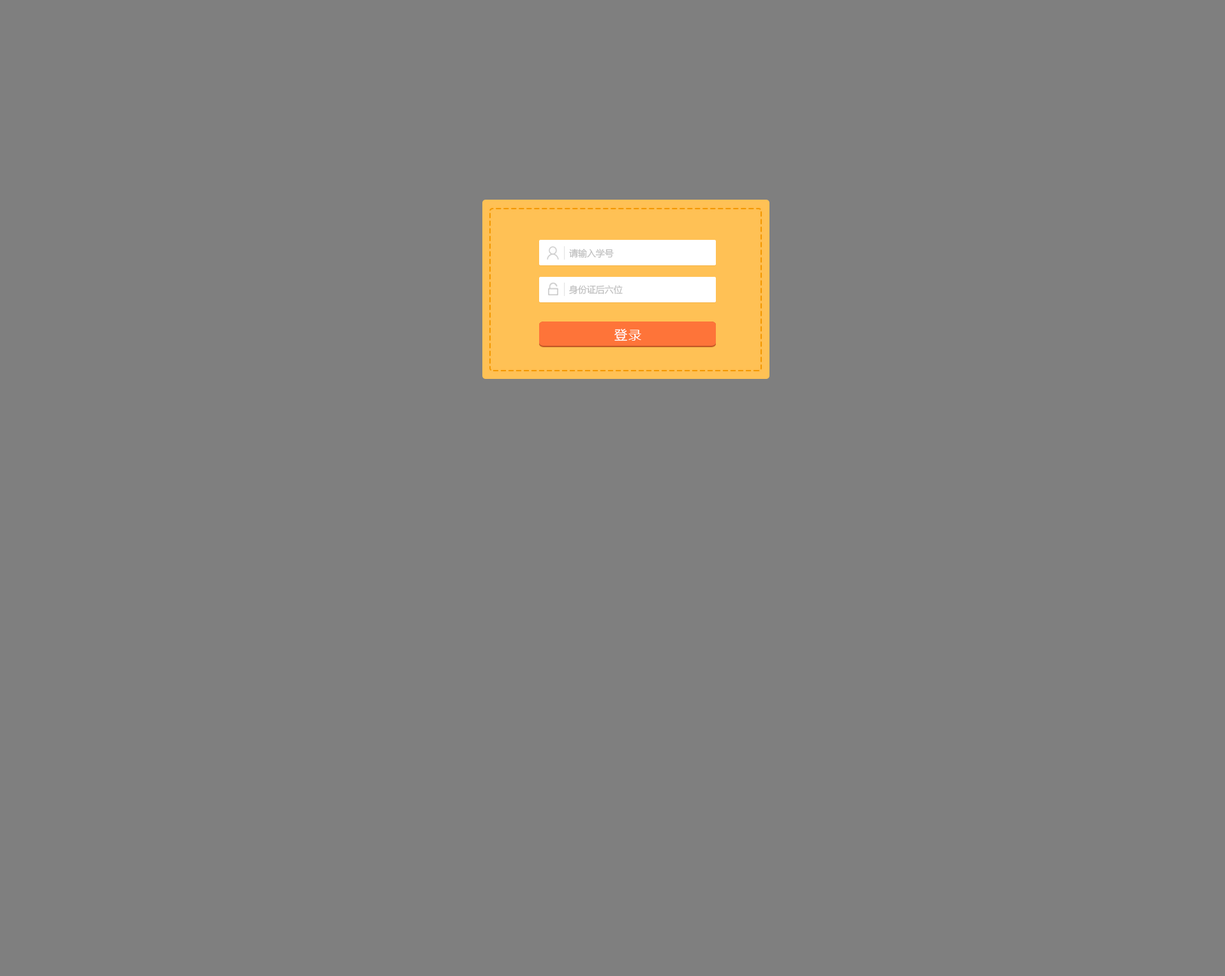
<style>
.page{position:relative;width:1225px;height:976px;background:#7f7f7f}
.page>*{position:absolute;margin:0}
.t1{font:9px "MicrosoftYaHei";color:#bdbdbd}
.t2{font:12.8px "MicrosoftYaHei";letter-spacing:0.1em;color:#ffffff}
</style>
<div class="page">
<p class="t1" style="left:569px;top:249px;width:45px;height:9px">请输入学号</p>
<p class="t1" style="left:569px;top:285px;width:54px;height:9px">身份证后六位</p>
<p class="t2" style="left:614px;top:329px;width:27px;height:12px">登录</p>
</div>
